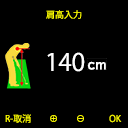
<style>
.page{position:relative;width:128px;height:128px;background:#000000}
.page>*{position:absolute;margin:0}
.t1{font:9px "KozGoPr6N-Regular";color:#ffff00}
.t2{font:23.8px "KozGoPr6N-Regular";color:#ffffff}
</style>
<div class="page">
<p class="t1" style="left:46px;top:10px;width:36px;height:9px">肩高入力</p>
<p class="t2" style="left:47px;top:52px;width:38px;height:20px">140</p>
<p class="t1" style="left:5px;top:114px;width:117px;height:9px">R-取消　　⊕　　⊖　 　  OK</p>
</div>
